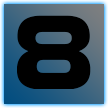
<style>
.page{position:relative;width:108px;height:108px;background:#000000}
.page>*{position:absolute;margin:0}
.t1{font:150px "ROBOTECHGP";color:#000000}
</style>
<div class="page">
<p class="t1" style="left:17px;top:15px;width:74px;height:74px">8</p>
</div>
